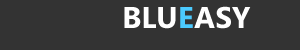
<style>
.page{position:relative;width:300px;height:50px;background:#333333}
.page>*{position:absolute;margin:0}
.t1{font:30px "SegoeUI-Bold";color:#ffffff;text-transform:uppercase}
.t2{font:30px "SegoeUI-Bold";color:#4bcaff;text-transform:uppercase}
</style>
<div class="page">
<p class="t1" style="left:124px;top:6px;width:127px;height:23px">blu<span class="t2">e</span>asy</p>
</div>
